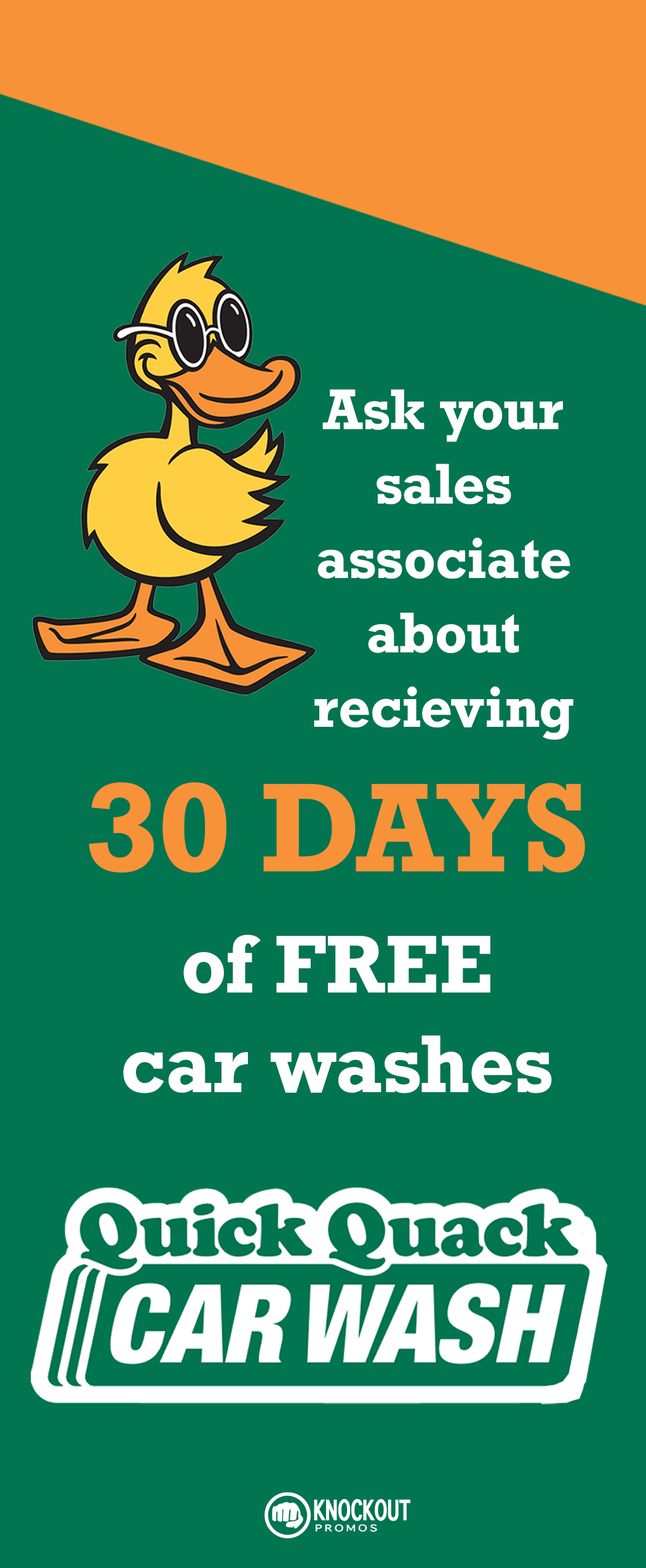
<style>
.page{position:relative;width:646px;height:1568px;background:#007550}
.page>*{position:absolute;margin:0}
.t1{font:53.8px/74.3px "Rockwell-Bold";color:#ffffff}
.t2{font:119px "Rockwell-Bold";color:#f79239}
.t3{font:76.9px/99.9px "Rockwell-Bold";color:#ffffff}
</style>
<div class="page">
<p class="t1" style="left:314px;top:389px;width:259px;height:351px;text-align:center">Ask your sales associate about recieving</p>
<p class="t2" style="left:89px;top:782px;width:496px;height:91px">30 DAYS</p>
<p class="t3" style="left:123px;top:935px;width:429px;height:158px;text-align:center">of FREE <br>car washes</p>
</div>
